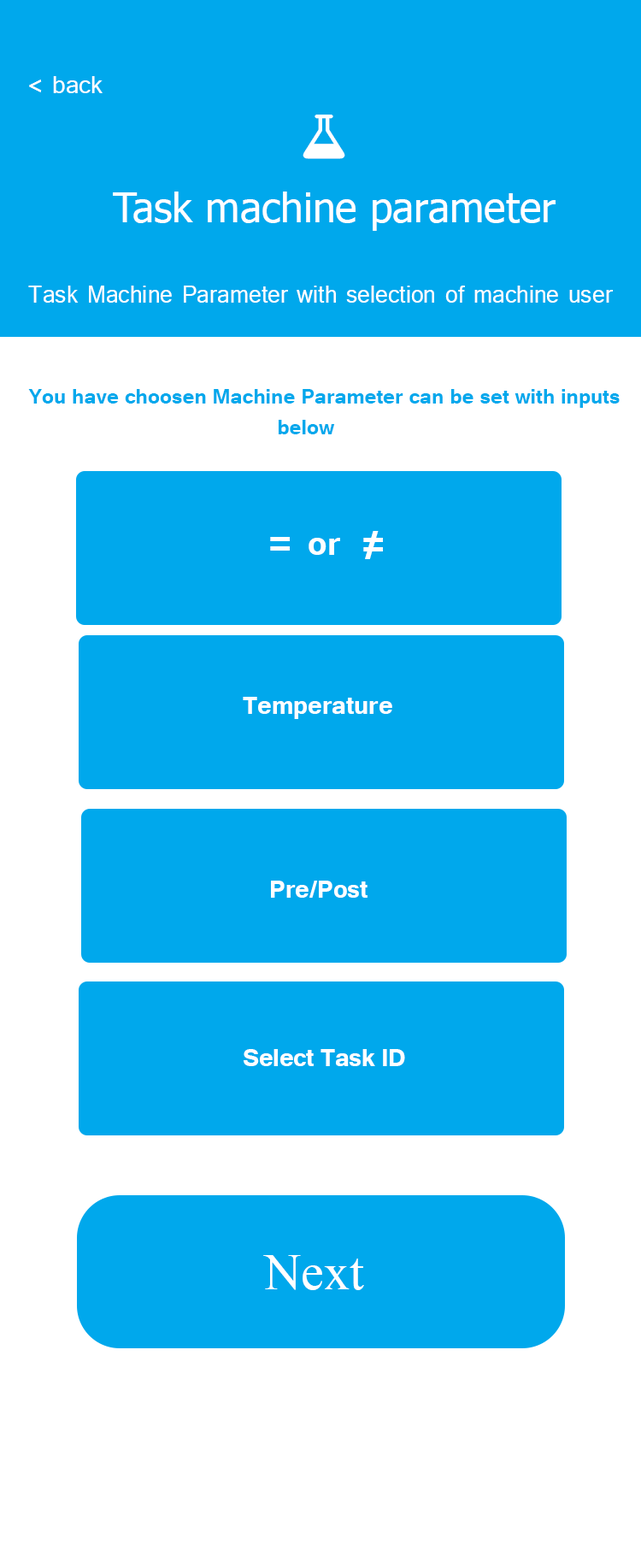
<style>
.page{position:relative;width:641px;height:1568px;background:#00a8ec}
.page>*{position:absolute;margin:0}
.t1{font:30.8px "Tunga";color:#ffffff}
.t2{font:41px "Tahoma";color:#ffffff}
.t3{font:30.8px "Tunga";color:#ffffff;scale:0.95 1}
.t4{font:25.6px "Tunga-Bold";color:#00a8ec}
.t5{font:51.3px "Tunga-Bold";color:#ffffff}
.t6{font:41px "Tunga-Bold";color:#ffffff}
.t7{font:30.8px "Tunga-Bold";color:#ffffff}
.t8{font:30.8px "Tunga-Bold";letter-spacing:-0.01em;color:#ffffff}
.t9{font:51.3px "TimesNewRomanPSMT";color:#ffffff}
</style>
<div class="page">
<p class="t1" style="left:29px;top:76px;width:74px;height:17px">&lt; back</p>
<p class="t2" style="left:113px;top:192px;width:443px;height:39px">Task machine parameter</p>
<p class="t3" style="left:28px;top:286px;width:585px;height:17px">Task Machine Parameter with selection of machine user</p>
<p class="t4" style="left:28px;top:389px;width:592px;height:45px">You have choosen Machine Parameter can be set with inputs <br>                                          below</p>
<p class="t5" style="left:365px;top:531px;width:14px;height:28px">/</p>
<p class="t5" style="left:270px;top:537px;width:20px;height:14px">=</p>
<p class="t6" style="left:309px;top:538px;width:31px;height:17px">or</p>
<p class="t5" style="left:363px;top:538px;width:20px;height:13px">=</p>
<p class="t7" style="left:243px;top:697px;width:149px;height:22px">Temperature</p>
<p class="t7" style="left:271px;top:881px;width:97px;height:17px">Pre/Post</p>
<p class="t8" style="left:244px;top:1049px;width:161px;height:17px">Select Task ID</p>
<p class="t9" style="left:263px;top:1255px;width:101px;height:35px">Next</p>
</div>
